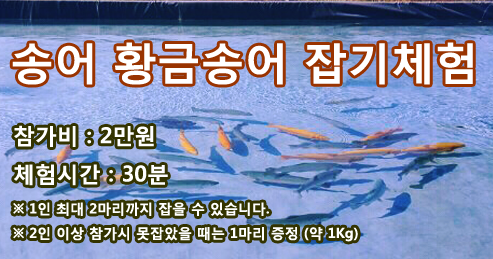
<style>
.page{position:relative;width:493px;height:259px}
.page>*{position:absolute;margin:0}
.t1{font:43.8px "MalgunGothicBold";color:#ffffff}
.t2{font:14px "MalgunGothicBold";color:#ffffff}
.t3{font:21.9px "MalgunGothicBold";color:#ffffff}
</style>
<div class="page">
<p class="t1" style="left:12px;top:42px;width:461px;height:43px">송어 황금송어 잡기체험</p>
<p class="t2" style="left:13px;top:125px;width:345px;height:117px"><span class="t3">참가비 : 2만원<br>체험시간 : 30분<br></span>※ 1인 최대 2마리까지 잡을 수 있습니다.<br>※ 2인 이상 참가시 못잡았을 때는 1마리 증정 (약 1Kg)</p>
</div>
